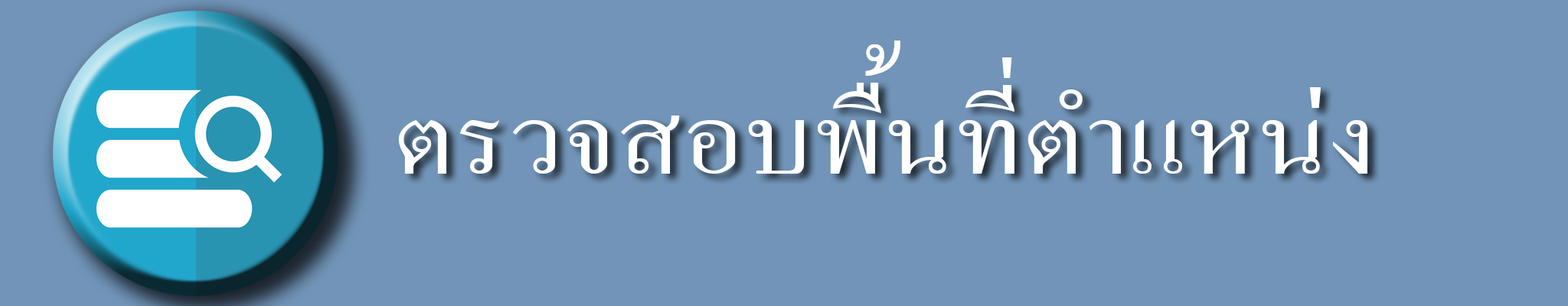
<style>
.page{position:relative;width:1568px;height:306px;background:#7194b8}
.page>*{position:absolute;margin:0}
.t1{font:134px "AngsanaNew";color:#ffffff}
.t2{font:133.7px "AngsanaNew";color:#ffffff;scale:1.15 1}
</style>
<div class="page">
<p class="t1" style="left:865px;top:41px;width:35px;height:35px">้้</p>
<p class="t1" style="left:1001px;top:57px;width:11px;height:21px">่</p>
<p class="t2" style="left:398px;top:83px;width:969px;height:91px">ตรวจสอบพืนทีตำแหน่ง</p>
</div>
